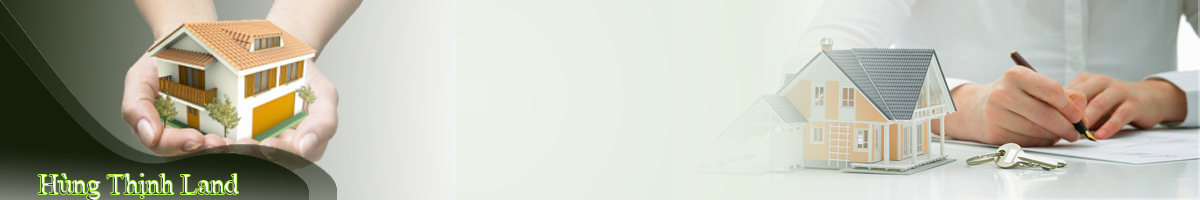
<style>
.page{position:relative;width:1200px;height:200px}
.page>*{position:absolute;margin:0}
.t1{font:28px "TimesNewRomanPSMT"}
</style>
<div class="page">
<p class="t1" style="left:38px;top:174px;width:200px;height:26px">Hùng Thịnh Land</p>
</div>
